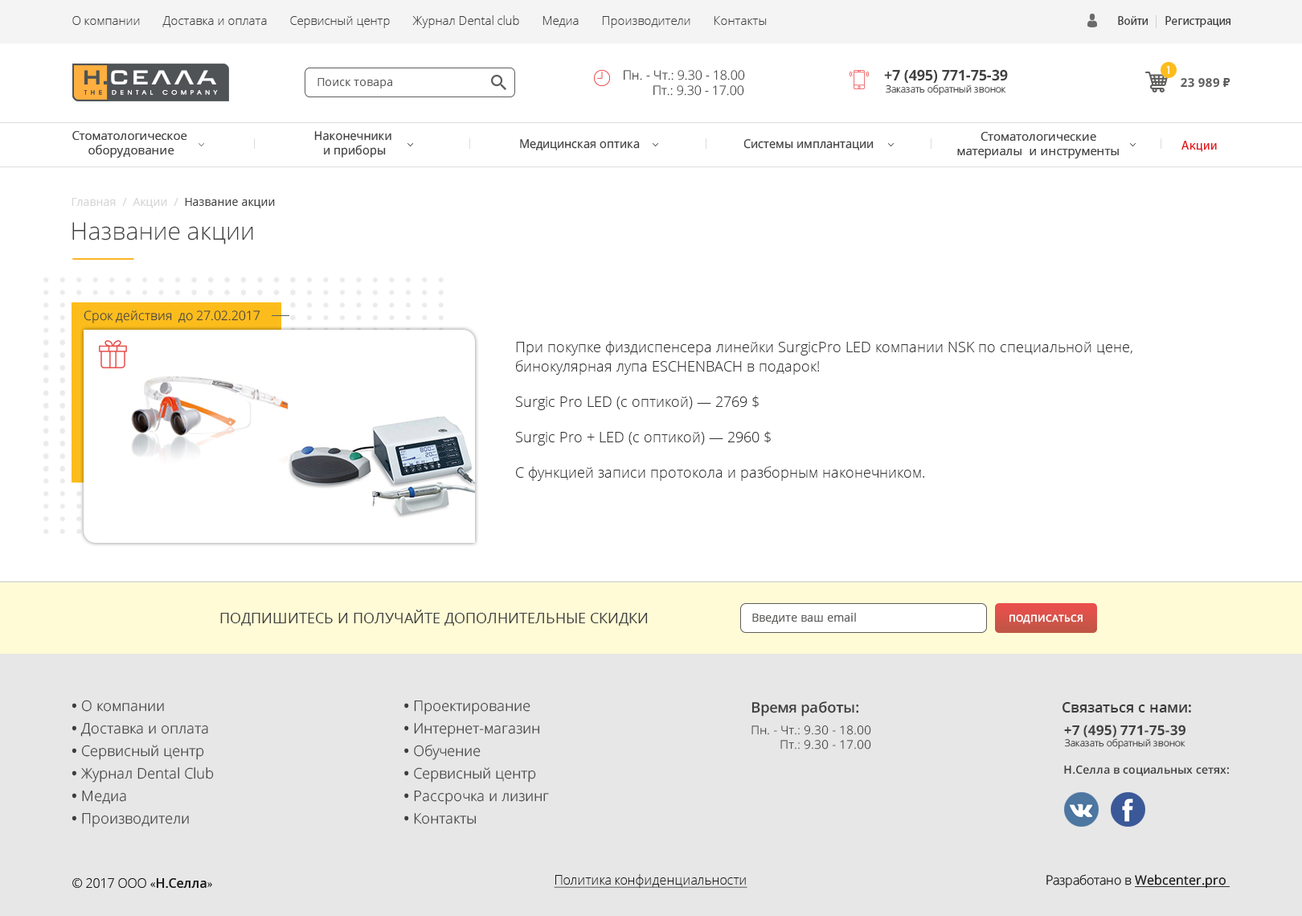
<style>
.page{position:relative;width:1302px;height:916px;background:#ffffff}
.page>*{position:absolute;margin:0}
.t1{font:12.1px "OpenSans-Light";color:#3e3e3e}
.t2{font:12.1px "MyriadPro-Regular";color:#3e3e3e}
.t3{font:11.3px "MyriadPro-Regular";color:#ffffff}
.t4{font:11.4px "OpenSans-Regular";color:#5e5e5d}
.t5{font:12.8px "OpenSans-Light";color:#414141}
.t6{font:9.9px "OpenSans-Light";color:#414141}
.t7{font:14.7px "OpenSans-Bold";color:#414141}
.t8{font:12.1px "OpenSans-Bold";color:#5e5e5d}
.t9{font:12.1px "Arial-BoldMT";color:#5e5e5d}
.t10{font:12.1px "OpenSans";color:#414141}
.t11{font:12.1px "OpenSans";color:#414141;scale:0.97 1}
.t12{font:12.9px "MyriadPro-Regular";color:#e3161c}
.t13{font:11.3px "OpenSans-Regular";color:#d7d6d6}
.t14{font:11.3px "OpenSans-Regular";color:#414141}
.t15{font:24.1px "OpenSans-Light";color:#3e3e3e}
.t16{font:12.9px "OpenSans-Light";color:#3e3e3e}
.t17{font:14.5px/19.3px "OpenSans-Light";color:#333333}
.t18{font:14.5px "OpenSans-Regular";color:#3e3e3e}
.t19{font:11.4px "OpenSans";color:#5e5e5d}
.t20{font:9.6px "OpenSans-SemiBold";color:#ffffff}
.t21{font:14.5px/22.5px "OpenSans-Light";color:#3e3e3e}
.t22{font:14.5px/22.5px "OpenSans-Bold";color:#3e3e3e}
.t23{font:11.9px "OpenSans-Light";color:#3e3e3e}
.t24{font:14.5px/7.2px "OpenSans-SemiBold";color:#3e3e3e}
.t25{font:14.5px "OpenSans-SemiBold";color:#3e3e3e}
.t26{font:9.6px "OpenSans-Light";color:#414141}
.t27{font:13.7px "OpenSans-Bold";color:#414141}
.t28{font:11.2px "OpenSans-SemiBold";color:#3e3e3e}
.t29{font:12.9px "OpenSans-Light";color:#181818}
.t30{font:12.9px "MinionPro-Regular";color:#181818}
.t31{font:12.9px "OpenSans-Semibold";color:#181818}
.t32{font:12.9px "OpenSans-Light";color:#181818;text-decoration:underline}
.t33{font:12.8px "OpenSans-Light";color:#181818}
.t34{font:12.8px "OpenSans";color:#181818;text-decoration:underline}
</style>
<div class="page">
<p class="t1" style="left:72px;top:15px;width:1159px;height:13px">О компании       Доставка и оплата       Сервисный центр       Журнал Dental club       Медиа       Производители       Контакты                                                                                                             <span class="t2">Войти       Регистрация</span></p>
<p class="t3" style="left:1166px;top:66px;width:4px;height:8px">1</p>
<p class="t4" style="left:318px;top:78px;width:74px;height:10px">Поиск товара</p>
<p class="t5" style="left:624px;top:70px;width:121px;height:26px;text-align:center">Пн. - Чт.: 9.30 - 18.00<br>         Пт.: 9.30 - 17.00</p>
<p class="t6" style="left:884px;top:69px;width:124px;height:27px;text-align:center"><span class="t7">+7 (495) 771-75-39<br></span>Заказать обратный звонок</p>
<p class="t8" style="left:1181px;top:78px;width:50px;height:10px">23 989 <span class="t9">₽</span></p>
<p class="t10" style="left:72px;top:131px;width:115px;height:27px;text-align:center">Стоматологическое <br>оборудование</p>
<p class="t11" style="left:314px;top:131px;width:77px;height:27px;text-align:center">Наконечники <br>и приборы</p>
<p class="t10" style="left:957px;top:132px;width:162px;height:26px;text-align:center">Стоматологические <br>материалы  и инструменты</p>
<p class="t11" style="left:520px;top:139px;width:120px;height:11px">Медицинская оптика</p>
<p class="t11" style="left:744px;top:139px;width:130px;height:11px">Системы имплантации</p>
<p class="t12" style="left:1182px;top:141px;width:35px;height:11px">Акции</p>
<p class="t13" style="left:72px;top:198px;width:203px;height:10px">Главная  /  Акции  /  <span class="t14">Название акции</span></p>
<p class="t15" style="left:72px;top:222px;width:181px;height:22px">Название акции</p>
<p class="t16" style="left:84px;top:309px;width:176px;height:14px">Срок действия  до 27.02.2017</p>
<p class="t17" style="left:515px;top:341px;width:618px;height:140px">При покупке физдиспенсера линейки SurgicPro LED компании NSK по специальной цене, бинокулярная лупа ESCHENBACH в подарок!<br>Surgic Pro LED (с оптикой) — 2769 $<br>Surgic Pro + LED (с оптикой) — 2960 $<br>С функцией записи протокола и разборным наконечником.</p>
<p class="t18" style="left:220px;top:609px;width:428px;height:16px">ПОДПИШИТЕСЬ И ПОЛУЧАЙТЕ ДОПОЛНИТЕЛЬНЫЕ СКИДКИ</p>
<p class="t19" style="left:752px;top:613px;width:104px;height:11px">Введите ваш email</p>
<p class="t20" style="left:1010px;top:614px;width:73px;height:10px">ПОДПИСАТЬСЯ</p>
<p class="t21" style="left:72px;top:699px;width:142px;height:128px"><span class="t22">•</span> О компании<br><span class="t22">•</span> Доставка и оплата<br><span class="t22">•</span> Сервисный центр<br><span class="t22">•</span> Журнал Dental Club<br><span class="t22">•</span> Медиа<br><span class="t22">•</span> Производители</p>
<p class="t21" style="left:404px;top:700px;width:145px;height:124px"><span class="t22">•</span> Проектирование<br><span class="t22">•</span> Интернет-магазин<br><span class="t22">•</span> Обучение<br><span class="t22">•</span> Сервисный центр<br><span class="t22">•</span> Рассрочка и лизинг<br><span class="t22">•</span> Контакты</p>
<p class="t23" style="left:752px;top:701px;width:119px;height:48px"><span class="t24">Время работы:<br><br></span>Пн. - Чт.: 9.30 - 18.00<br>         Пт.: 9.30 - 17.00</p>
<p class="t25" style="left:1063px;top:702px;width:128px;height:10px">Связаться с нами:</p>
<p class="t26" style="left:1064px;top:724px;width:122px;height:25px;text-align:center"><span class="t27">+7 (495) 771-75-39<br></span>Заказать обратный звонок</p>
<p class="t28" style="left:1064px;top:765px;width:165px;height:11px">Н.Селла в социальныx сетях:</p>
<p class="t29" style="left:72px;top:878px;width:140px;height:9px">© 2017 ООО <span class="t30">«</span><span class="t31">Н.Селла</span><span class="t30">»</span></p>
<p class="t32" style="left:554px;top:874px;width:194px;height:13px">Политика конфиденциальности</p>
<p class="t33" style="left:1047px;top:874px;width:183px;height:13px">Разработано в <span class="t34">Webcenter.pro</span></p>
</div>
